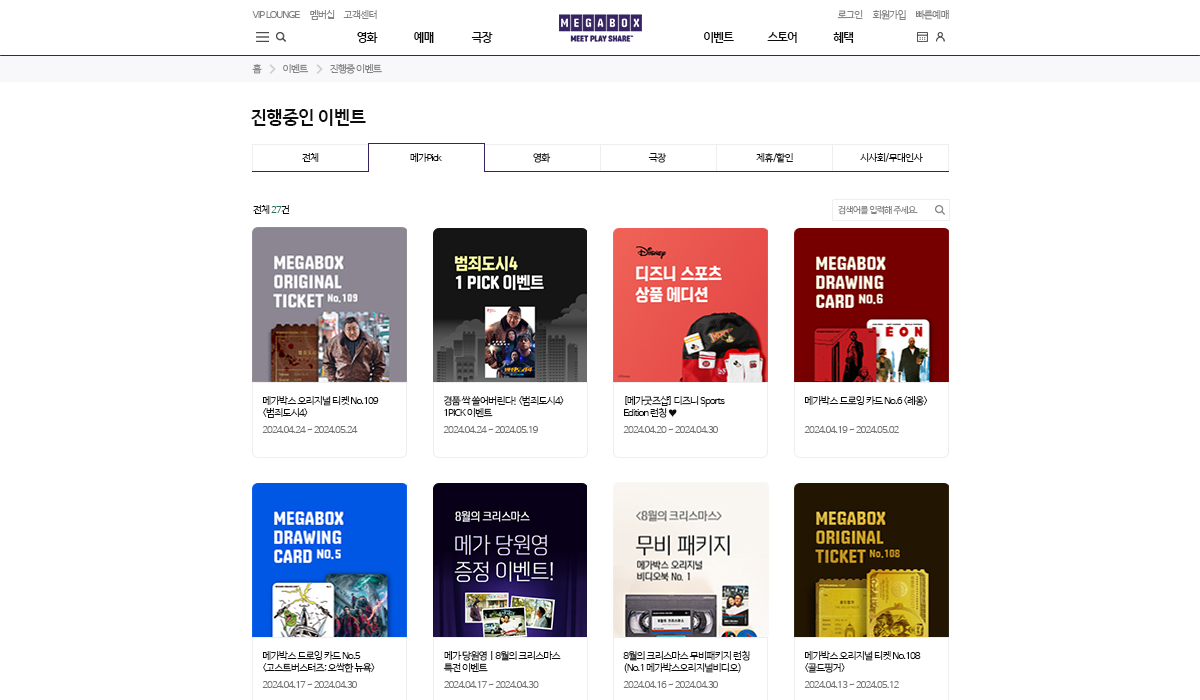
<style>
.page{position:relative;width:1200px;height:700px;background:#ffffff}
.page>*{position:absolute;margin:0}
.t1{font:10px "HancomGothicRegular";letter-spacing:-0.1em;color:#838383}
.t2{font:12px "HancomGothicBold";letter-spacing:-0.1em;color:#0e0d0d}
.t3{font:18px "HancomGothicBold";letter-spacing:-0.05em;color:#0e0d0d}
.t4{font:10px "HancomGothicRegular";letter-spacing:-0.1em;color:#0e0d0d}
.t5{font:10px "HancomGothicRegular";letter-spacing:-0.1em}
.t6{font:10px "HancomGothicRegular";letter-spacing:-0.1em;color:#21715d}
.t7{font:9px "HancomGothicRegular";letter-spacing:-0.1em;color:#838383}
.t8{font:10px/12px "HancomGothicRegular";letter-spacing:-0.1em;color:#0e0d0d}
.t9{font:10px "HancomGothicRegular";letter-spacing:-0.1em;color:#767676}
</style>
<div class="page">
<p class="t1" style="left:252px;top:11px;width:48px;height:7px">VIP LOUNGE</p>
<p class="t1" style="left:310px;top:10px;width:25px;height:10px">멤버십</p>
<p class="t1" style="left:343px;top:10px;width:34px;height:9px">고객센터</p>
<p class="t1" style="left:837px;top:10px;width:26px;height:9px">로그인</p>
<p class="t1" style="left:872px;top:10px;width:34px;height:10px">회원가입</p>
<p class="t1" style="left:916px;top:10px;width:33px;height:10px">빠른예매</p>
<p class="t2" style="left:357px;top:32px;width:21px;height:11px">영화</p>
<p class="t2" style="left:414px;top:32px;width:20px;height:11px">예매</p>
<p class="t2" style="left:471px;top:32px;width:22px;height:11px">극장</p>
<p class="t2" style="left:704px;top:32px;width:30px;height:11px">이벤트</p>
<p class="t2" style="left:767px;top:32px;width:30px;height:11px">스토어</p>
<p class="t2" style="left:833px;top:32px;width:21px;height:11px">혜택</p>
<p class="t1" style="left:252px;top:63px;width:10px;height:11px">홈</p>
<p class="t1" style="left:283px;top:64px;width:26px;height:9px">이벤트</p>
<p class="t1" style="left:330px;top:63px;width:52px;height:11px">진행중 이벤트</p>
<p class="t3" style="left:251px;top:109px;width:115px;height:17px">진행중인 이벤트</p>
<p class="t4" style="left:302px;top:153px;width:17px;height:9px">전체</p>
<p class="t4" style="left:410px;top:153px;width:32px;height:9px">메가Pick</p>
<p class="t5" style="left:533px;top:153px;width:18px;height:10px">영화</p>
<p class="t4" style="left:648px;top:153px;width:19px;height:10px">극장</p>
<p class="t4" style="left:756px;top:152px;width:37px;height:11px">제휴/할인</p>
<p class="t4" style="left:860px;top:153px;width:63px;height:9px">시사회/무대인사</p>
<p class="t4" style="left:253px;top:205px;width:37px;height:9px">전체 <span class="t6">27</span>건</p>
<p class="t7" style="left:838px;top:205px;width:80px;height:10px">검색어를 입력해 주세요.</p>
<p class="t8" style="left:263px;top:396px;width:116px;height:22px">메가박스 오리지널 티켓 No.109 <br>&lt;범죄도시4&gt;</p>
<p class="t8" style="left:444px;top:396px;width:120px;height:21px">경품 싹 쓸어버린다! &lt;범죄도시4&gt; <br>1PICK 이벤트</p>
<p class="t8" style="left:624px;top:396px;width:101px;height:22px">[메가굿즈샵] 디즈니 Sports <br>Edition 런칭 ♥</p>
<p class="t4" style="left:805px;top:396px;width:123px;height:10px">메가박스 드로잉 카드 No.6 &lt;레옹&gt;</p>
<p class="t9" style="left:262px;top:426px;width:96px;height:7px">2024.04.24 ~ 2024.05.24</p>
<p class="t9" style="left:443px;top:426px;width:95px;height:7px">2024.04.24 ~ 2024.05.19</p>
<p class="t9" style="left:623px;top:426px;width:95px;height:7px">2024.04.20 ~ 2024.04.30</p>
<p class="t9" style="left:804px;top:426px;width:95px;height:7px">2024.04.19 ~ 2024.05.02</p>
<p class="t8" style="left:263px;top:651px;width:112px;height:22px">메가박스 드로잉 카드 No.5 <br>&lt;고스트버스터즈: 오싹한 뉴욕&gt;</p>
<p class="t8" style="left:443px;top:651px;width:118px;height:22px">메가 당원영ㅣ8월의 크리스마스 <br>특전 이벤트</p>
<p class="t8" style="left:623px;top:650px;width:127px;height:23px">8월의 크리스마스 무비패키지 런칭<br>(No.1 메가박스오리지널비디오)</p>
<p class="t8" style="left:805px;top:651px;width:116px;height:22px">메가박스 오리지널 티켓 No.108 <br>&lt;골드핑거&gt;</p>
<p class="t9" style="left:262px;top:681px;width:95px;height:7px">2024.04.17 ~ 2024.04.30</p>
<p class="t9" style="left:444px;top:681px;width:95px;height:7px">2024.04.17 ~ 2024.04.30</p>
<p class="t9" style="left:623px;top:681px;width:95px;height:7px">2024.04.16 ~ 2024.04.30</p>
<p class="t9" style="left:804px;top:681px;width:95px;height:7px">2024.04.13 ~ 2024.05.12</p>
</div>
